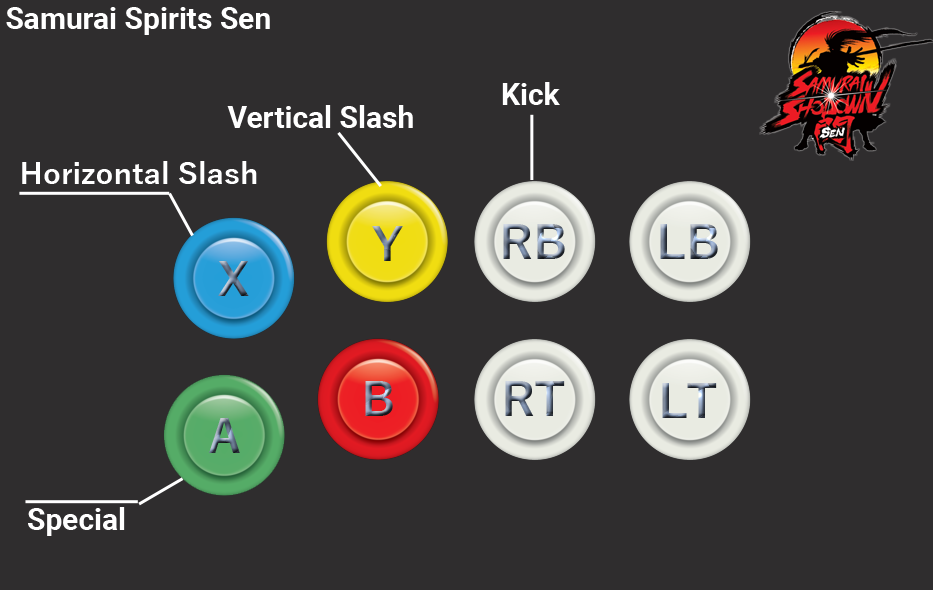
<style>
.page{position:relative;width:933px;height:590px;background:#2f2d2e}
.page>*{position:absolute;margin:0}
.t1{font:30px "Roboto-Bold";color:#ffffff}
.t2{font:30px "YuGothic-Bold";color:#ffffff}
</style>
<div class="page">
<p class="t1" style="left:6px;top:7px;width:264px;height:28px">Samurai Spirits Sen</p>
<p class="t1" style="left:502px;top:82px;width:58px;height:23px">Kick</p>
<p class="t1" style="left:227px;top:105px;width:186px;height:23px">Vertical Slash</p>
<p class="t2" style="left:22px;top:161px;width:235px;height:23px">Horizontal Slash</p>
<p class="t1" style="left:28px;top:507px;width:97px;height:29px">Special</p>
</div>
